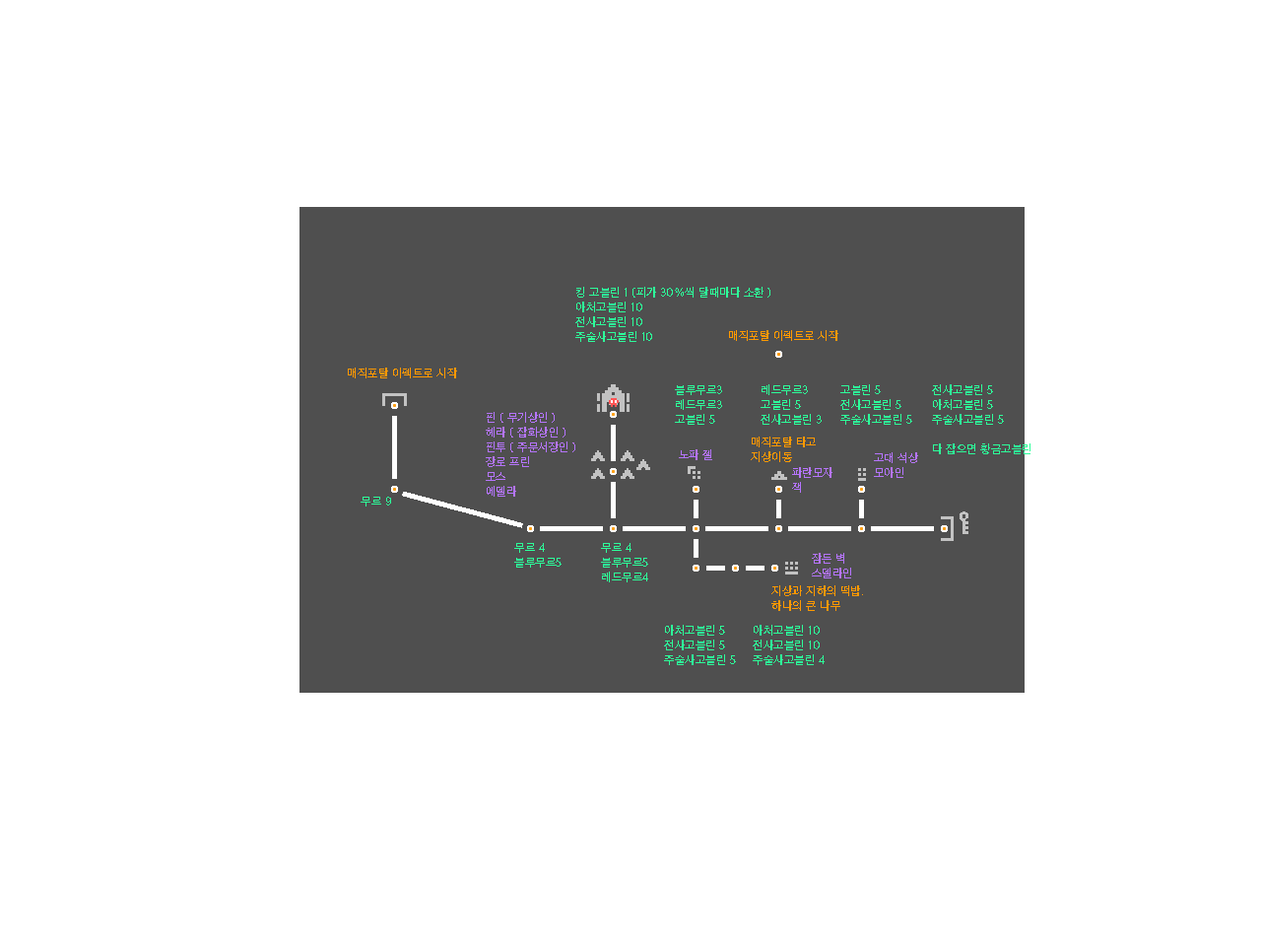
<style>
.page{position:relative;width:1261px;height:946px;background:#ffffff}
.page>*{position:absolute;margin:0}
.t1{font:11.8px/14.8px "AppleSDGothicNeoM00";letter-spacing:0.04em;color:#2dff9a}
.t2{font:11.8px "AppleSDGothicNeoM00";letter-spacing:0.04em;color:#ff9900}
.t3{font:11.8px/14.8px "AppleSDGothicNeoM00";letter-spacing:0.04em;color:#b675ff}
.t4{font:11.8px/14.8px "AppleSDGothicNeoM00";letter-spacing:0.04em;color:#ff9900}
.t5{font:11.8px "AppleSDGothicNeoM00";letter-spacing:0.04em;color:#b675ff}
.t6{font:11.8px "AppleSDGothicNeoM00";letter-spacing:0.04em;color:#2dff9a}
</style>
<div class="page">
<p class="t1" style="left:575px;top:287px;width:195px;height:55px">킹 고블린 1 (피가 30%씩 달때마다 소환 )<br>아처고블린 10<br>전사고블린 10<br>주술사고블린 10</p>
<p class="t2" style="left:729px;top:330px;width:109px;height:11px">매직포탈 이펙트로 시작</p>
<p class="t2" style="left:348px;top:367px;width:109px;height:11px">매직포탈 이펙트로 시작</p>
<p class="t1" style="left:675px;top:385px;width:47px;height:40px">블루무르3<br>레드무르3<br>고블린 5</p>
<p class="t1" style="left:760px;top:384px;width:62px;height:41px">레드무르3<br>고블린 5<br>전사고블린 3</p>
<p class="t1" style="left:840px;top:384px;width:72px;height:41px">고블린 5<br>전사고블린 5<br>주술사고블린 5</p>
<p class="t1" style="left:932px;top:384px;width:98px;height:70px">전사고블린 5<br>아처고블린 5<br>주술사고블린 5<br><br>다 잡으면 황금고블린</p>
<p class="t3" style="left:486px;top:412px;width:89px;height:84px">핀 ( 무기상인 )<br>헤라 ( 잡화상인 )<br>핀투 ( 주문서장인 )<br>장로 프린<br>모스 <br>에델라</p>
<p class="t4" style="left:751px;top:436px;width:65px;height:26px">매직포탈 타고 <br>지상이동</p>
<p class="t4" style="left:751px;top:436px;width:65px;height:26px">매직포탈 타고 <br>지상이동</p>
<p class="t5" style="left:679px;top:449px;width:33px;height:11px">노파 젤</p>
<p class="t3" style="left:874px;top:452px;width:44px;height:26px">고대 석상<br>모아인</p>
<p class="t3" style="left:792px;top:467px;width:40px;height:26px">파란모자<br>잭</p>
<p class="t6" style="left:361px;top:496px;width:30px;height:10px">무르 9</p>
<p class="t1" style="left:514px;top:543px;width:48px;height:24px">무르 4<br>블루무르5</p>
<p class="t1" style="left:601px;top:543px;width:47px;height:39px">무르 4<br>블루무르5<br>레드무르4</p>
<p class="t3" style="left:812px;top:553px;width:39px;height:25px">잠든 벽<br>스델라인</p>
<p class="t4" style="left:771px;top:585px;width:92px;height:26px">지상과 지하의 떡밥.<br>하나의 큰 나무</p>
<p class="t1" style="left:664px;top:625px;width:72px;height:40px">아처고블린 5<br>전사고블린 5<br>주술사고블린 5</p>
<p class="t1" style="left:753px;top:625px;width:72px;height:40px">아처고블린 10<br>전사고블린 10<br>주술사고블린 4</p>
</div>
